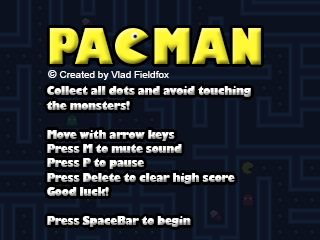
<style>
.page{position:relative;width:320px;height:240px;background:#0b111f}
.page>*{position:absolute;margin:0}
.t1{font:48px "GillSans-UltraBold";scale:0.8 1}
.t2{font:10px "ArialMT";color:#ffffff}
.t3{font:11px "ArialMT";color:#ffffff}
.t4{font:12px "GillSans-UltraBold";scale:0.8 1}
</style>
<div class="page">
<p class="t1" style="left:49px;top:28px;width:212px;height:37px">PA   MAN</p>
<p class="t2" style="left:48px;top:70px;width:121px;height:10px"><span class="t3">© </span>Created by Vlad Fieldfox</p>
<p class="t4" style="left:46px;top:86px;width:205px;height:141px">Collect all dots and avoid touching<br>the monsters!<br><br>Move with arrow keys<br>Press M to mute sound<br>Press P to pause<br>Press Delete to clear high score<br>Good luck!<br><br>Press SpaceBar to begin</p>
</div>
